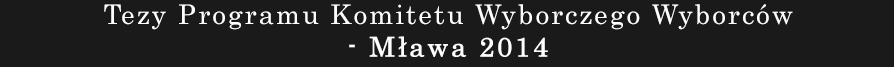
<style>
.page{position:relative;width:894px;height:67px;background:#1a1a1a}
.page>*{position:absolute;margin:0}
.t1{font:27px "Century";letter-spacing:0.075em;color:#ffffff}
.t2{font:21.9px "LucidaConsole";letter-spacing:0.075em;color:#ffffff;font-weight:bold}
.t3{font:27px "Century";letter-spacing:0.075em;color:#ffffff;font-weight:bold}
</style>
<div class="page">
<p class="t1" style="left:104px;top:4px;width:689px;height:53px;text-align:center"><span class="t2"><br></span><br>Tezy Programu Komitetu Wyborczego Wyborców <br><span class="t3">- Mława 2014</span></p>
</div>
